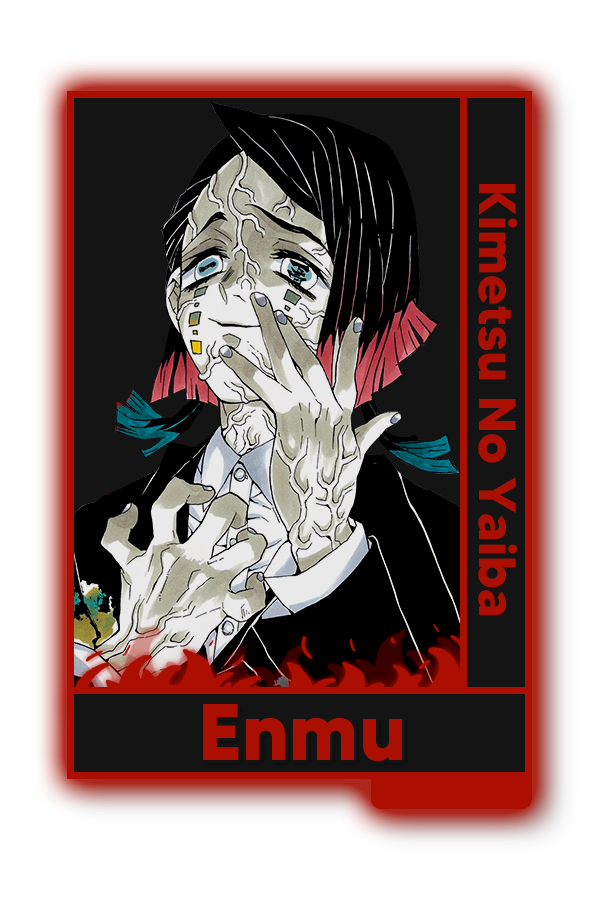
<style>
.page{position:relative;width:600px;height:900px;background:#ffffff}
.page>*{position:absolute;margin:0}
.t1{font:52px "MADETOMMY-Bold";color:#ab0f01}
.t2{font:79.9px "MADETOMMY-Bold";color:#ab0f01}
</style>
<div class="page">
<p class="t1" style="left:478px;top:184px;width:40px;height:431px;rotate:90deg">Kimetsu No Yaiba</p>
<p class="t2" style="left:203px;top:704px;width:199px;height:57px">Enmu</p>
</div>
